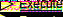
<style>
.page{position:relative;width:63px;height:17px;background:#000000}
.page>*{position:absolute;margin:0}
.t1{font:12px "ArialMT"}
</style>
<div class="page">
<p class="t1" style="left:20px;top:4px;width:43px;height:9px">Execute</p>
</div>
